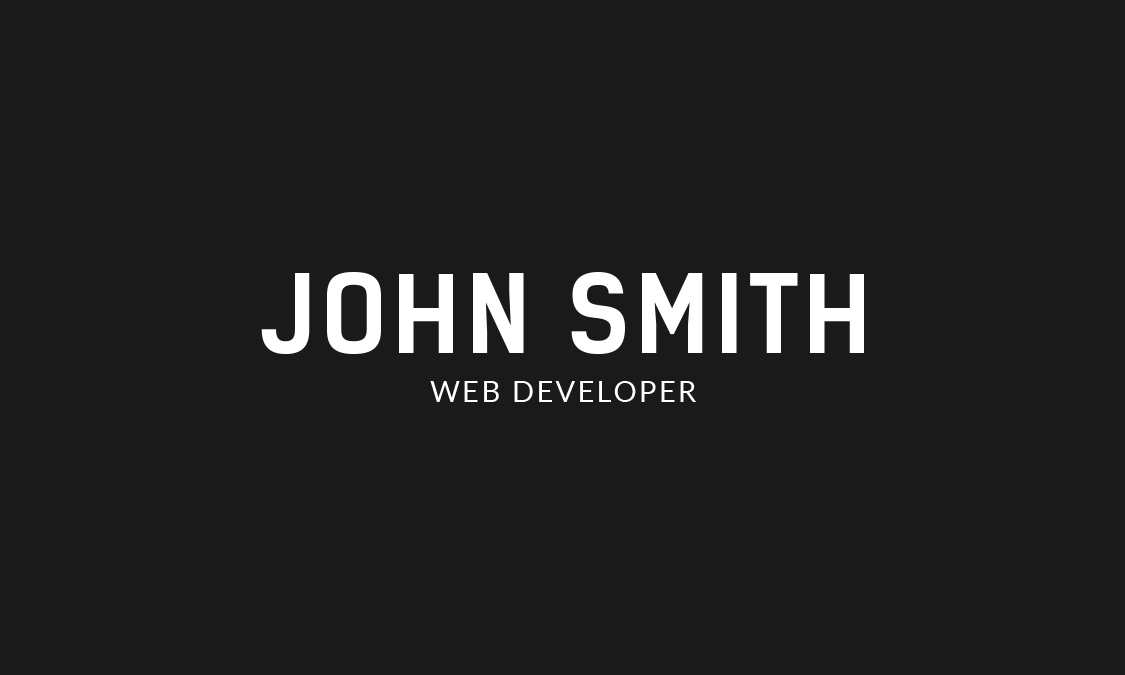
<style>
.page{position:relative;width:1125px;height:675px;background:#1a1a1a}
.page>*{position:absolute;margin:0}
.t1{font:104.3px "KelsonSans-Bold";letter-spacing:0.05em;color:#ffffff;text-transform:uppercase}
.t2{font:29.2px "Lato-Regular";letter-spacing:0.075em;color:#ffffff;text-transform:uppercase}
</style>
<div class="page">
<p class="t1" style="left:261px;top:272px;width:603px;height:83px">John Smith</p>
<p class="t2" style="left:430px;top:381px;width:266px;height:21px">WEB DEVELOPER</p>
</div>
